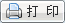
<style>
.page{position:relative;width:65px;height:23px}
.page>*{position:absolute;margin:0}
.t1{font:12px "SimSun";letter-spacing:0.1em;color:#2d2e30}
</style>
<div class="page">
<p class="t1" style="left:27px;top:5px;width:31px;height:12px">打 印</p>
</div>
